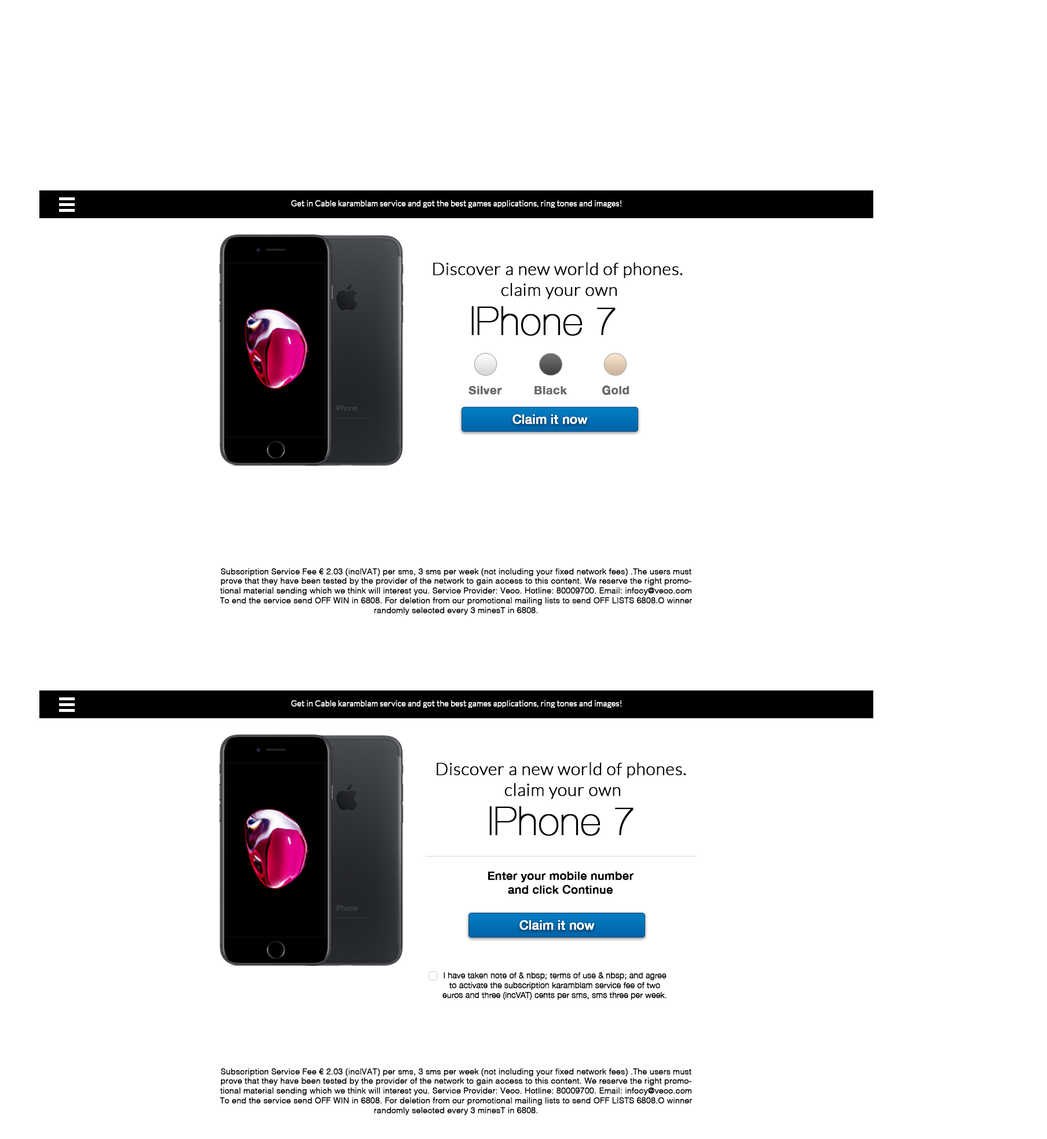
<style>
.page{position:relative;width:1047px;height:1139px;background:#ffffff}
.page>*{position:absolute;margin:0}
.t1{font:8.1px "Lato-Light";color:#fefefe;font-weight:bold}
.t2{font:17.4px "Lato-Light";color:#000000;font-weight:bold}
.t3{font:39.4px "HelveticaNeue-UltraLight";color:#000000;font-weight:bold}
.t4{font:11.8px "HelveticaNeue-Bold";color:#6a6a6a;font-weight:bold}
.t5{font:12.6px "HelveticaNeue-Medium";color:#ffffff;font-weight:bold}
.t6{font:8.1px "Helvetica-Light";color:#000000;font-weight:bold}
.t7{font:11.6px "HelveticaNeue-Medium";color:#000000;font-weight:bold}
.t8{font:8.1px "HelveticaNeue-Light";color:#000000;font-weight:bold}
</style>
<div class="page">
<p class="t1" style="left:291px;top:200px;width:331px;height:8px">Get in Cable karamblam service and got the best games applications, ring tones and images!</p>
<p class="t2" style="left:433px;top:262px;width:250px;height:37px;text-align:center">Discover a new world of phones. <br>claim your own</p>
<p class="t3" style="left:471px;top:306px;width:144px;height:30px">IPhone 7</p>
<p class="t4" style="left:468px;top:386px;width:34px;height:9px">Silver</p>
<p class="t4" style="left:534px;top:386px;width:33px;height:9px">Black</p>
<p class="t4" style="left:602px;top:386px;width:27px;height:9px">Gold</p>
<p class="t5" style="left:512px;top:414px;width:76px;height:10px">Claim it now</p>
<p class="t6" style="left:219px;top:568px;width:473px;height:47px;text-align:center">Subscription Service Fee € 2.03 (inclVAT) per sms, 3 sms per week (not including your fixed network fees) .The users must prove that they have been tested by the provider of the network to gain access to this content. We reserve the right promotional material sending which we think will interest you. Service Provider: Veoo. Hotline: 80009700. Email: infocy@veoo.com To end the service send OFF WIN in 6808. For deletion from our promotional mailing lists to send OFF LISTS 6808.O winner randomly selected every 3 minesT in 6808.</p>
<p class="t1" style="left:291px;top:700px;width:331px;height:8px">Get in Cable karamblam service and got the best games applications, ring tones and images!</p>
<p class="t2" style="left:436px;top:762px;width:250px;height:37px;text-align:center">Discover a new world of phones. <br>claim your own</p>
<p class="t3" style="left:489px;top:806px;width:144px;height:30px">IPhone 7</p>
<p class="t7" style="left:488px;top:872px;width:146px;height:22px;text-align:center">Enter your mobile number<br>and click Continue</p>
<p class="t5" style="left:519px;top:920px;width:76px;height:10px">Claim it now</p>
<p class="t8" style="left:442px;top:973px;width:224px;height:27px;text-align:center">I have taken note of &amp; nbsp; terms of use &amp; nbsp; and agree to activate the subscription karamblam service fee of two euros and three (incVAT) cents per sms, sms three per week.</p>
<p class="t6" style="left:219px;top:1069px;width:473px;height:47px;text-align:center">Subscription Service Fee € 2.03 (inclVAT) per sms, 3 sms per week (not including your fixed network fees) .The users must prove that they have been tested by the provider of the network to gain access to this content. We reserve the right promotional material sending which we think will interest you. Service Provider: Veoo. Hotline: 80009700. Email: infocy@veoo.com To end the service send OFF WIN in 6808. For deletion from our promotional mailing lists to send OFF LISTS 6808.O winner randomly selected every 3 minesT in 6808.</p>
</div>
